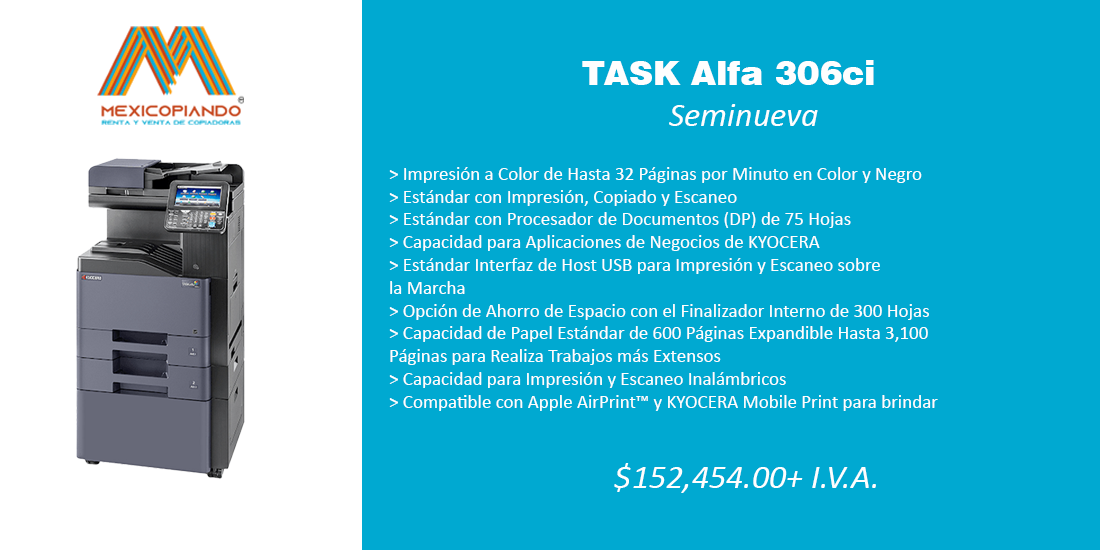
<style>
.page{position:relative;width:1100px;height:550px;background:#00a9d1}
.page>*{position:absolute;margin:0}
.t1{font:34px "Swiss721BT-Black";color:#fefefe}
.t2{font:34px "Calibri-Italic";color:#fefefe}
.t3{font:19px "Calibri";color:#fefefe}
</style>
<div class="page">
<p class="t1" style="left:582px;top:60px;width:292px;height:25px">TASK Alfa 306ci</p>
<p class="t2" style="left:669px;top:104px;width:149px;height:22px">Seminueva</p>
<p class="t3" style="left:389px;top:167px;width:549px;height:244px">&gt; Impresión a Color de Hasta 32 Páginas por Minuto en Color y Negro<br>&gt; Estándar con Impresión, Copiado y Escaneo<br>&gt; Estándar con Procesador de Documentos (DP) de 75 Hojas<br>&gt; Capacidad para Aplicaciones de Negocios de KYOCERA<br>&gt; Estándar Interfaz de Host USB para Impresión y Escaneo sobre<br>la Marcha<br>&gt; Opción de Ahorro de Espacio con el Finalizador Interno de 300 Hojas<br>&gt; Capacidad de Papel Estándar de 600 Páginas Expandible Hasta 3,100<br>Páginas para Realiza Trabajos más Extensos<br>&gt; Capacidad para Impresión y Escaneo Inalámbricos<br>&gt; Compatible con Apple AirPrint™ y KYOCERA Mobile Print para brindar<br>una Solución de Impresión en Red</p>
<p class="t2" style="left:614px;top:463px;width:262px;height:30px">$152,454.00+ I.V.A.</p>
</div>
